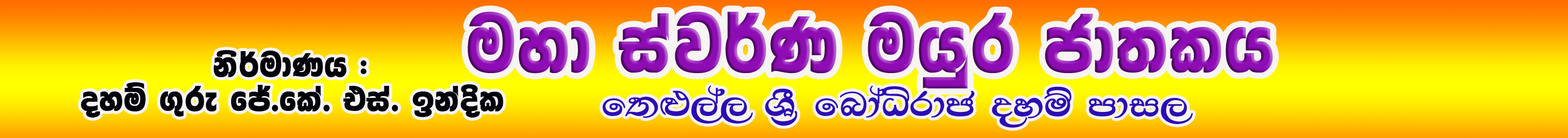
<style>
.page{position:relative;width:1568px;height:138px}
.page>*{position:absolute;margin:0}
.t1{font:90.3px "4u-Basuru";letter-spacing:0.025em;color:#8e0cb4;scale:0.93 1}
.t2{font:38.3px/34px "4u-Basuru";letter-spacing:0.025em;color:#04020a}
.t3{font:51px/34px "4u-Basuru";letter-spacing:0.025em;color:#2c0cb4}
.t4{font:38.3px "THARUDIGITALNIKINI";letter-spacing:0.025em;color:#2c0cb4;scale:1.06 1}
</style>
<div class="page">
<p class="t1" style="left:468px;top:11px;width:805px;height:77px">uyd iaj¾K uhqr cd;lh</p>
<p class="t2" style="left:81px;top:50px;width:422px;height:67px"><span class="t3">        </span>ks¾udKh ( <br>oyï .=re fÊ'fla' tia' bkaÈl</p>
<p class="t4" style="left:602px;top:85px;width:591px;height:43px">f;¿,a, YS% fndaêrdc oyï mdi,</p>
</div>
